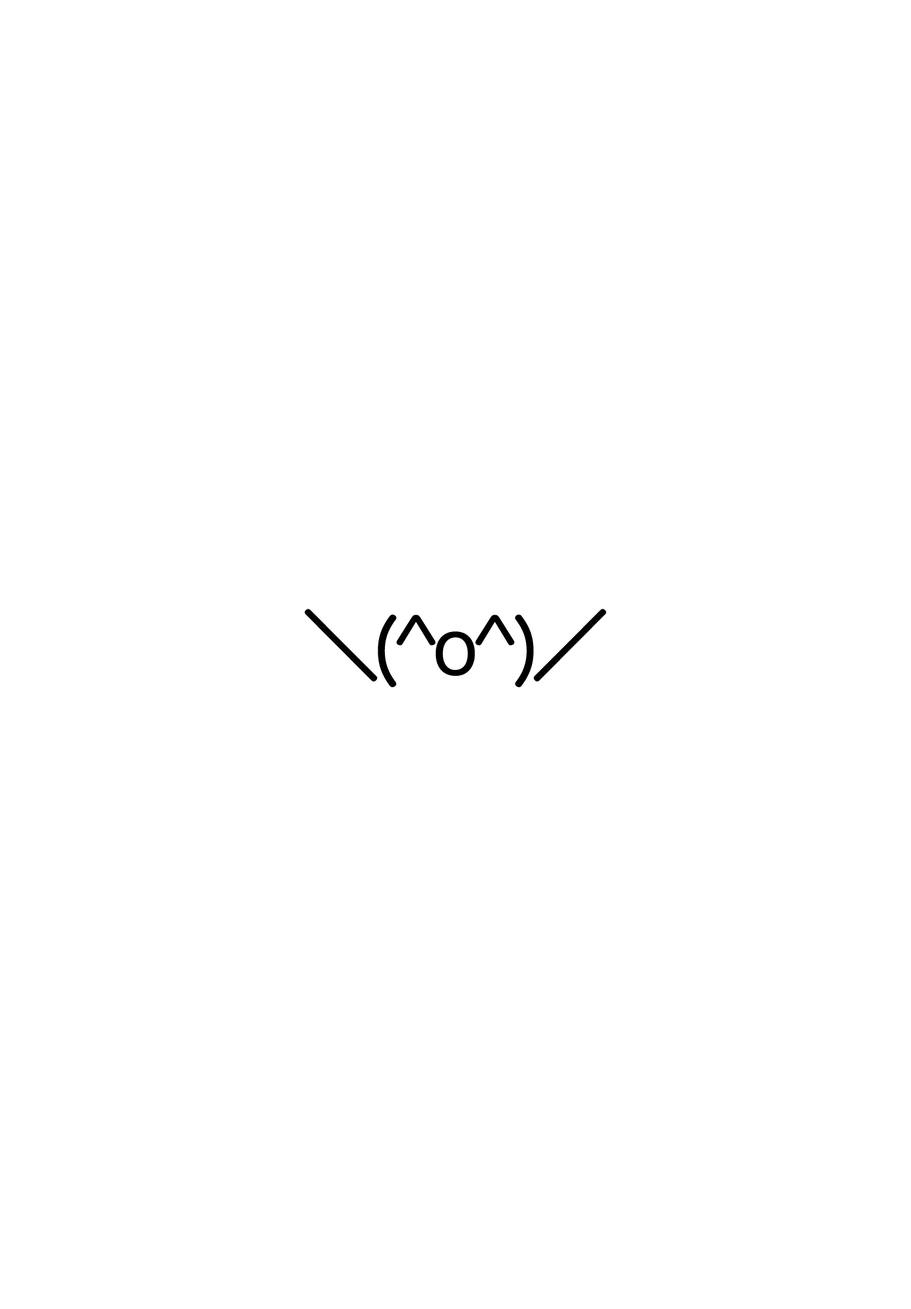
<style>
.page{position:relative;width:911px;height:1309px;background:#ffffff}
.page>*{position:absolute;margin:0}
.t1{font:75.9px "HiraMaruPro-W4";color:#000000}
</style>
<div class="page">
<p class="t1" style="left:304px;top:609px;width:302px;height:79px">＼(^o^)／</p>
</div>
